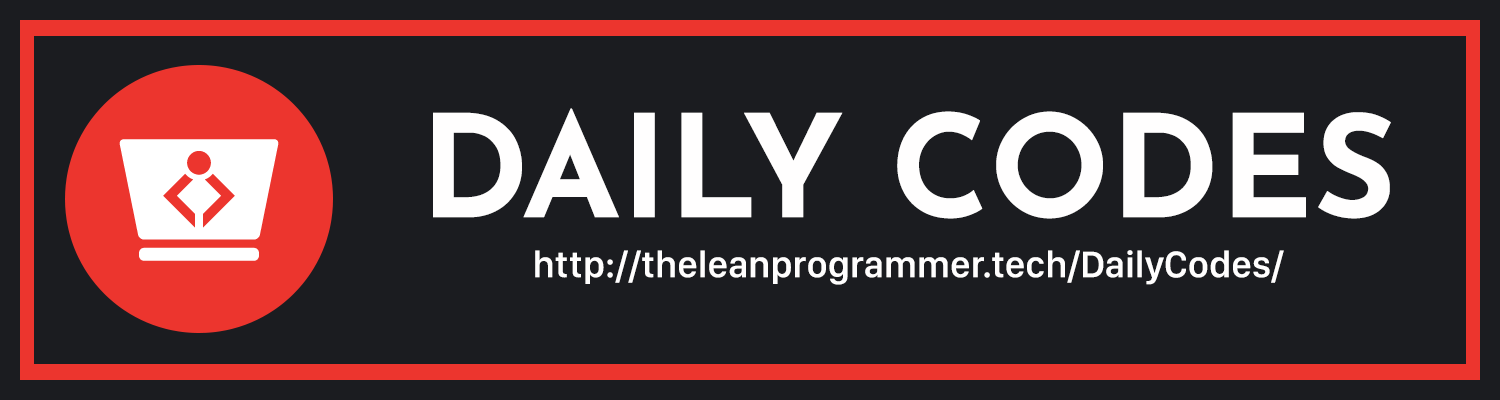
<style>
.page{position:relative;width:1500px;height:400px;background:#1b1c20}
.page>*{position:absolute;margin:0}
.t1{font:141.8px "JosefinSans-Bold";color:#fffefe}
.t2{font:38.2px "SanFranciscoDisplay-Semibold";color:#fffefe}
</style>
<div class="page">
<p class="t1" style="left:433px;top:108px;width:958px;height:111px">DAILY CODES</p>
<p class="t2" style="left:535px;top:250px;width:749px;height:35px">http://theleanprogrammer.tech/DailyCodes/</p>
</div>
